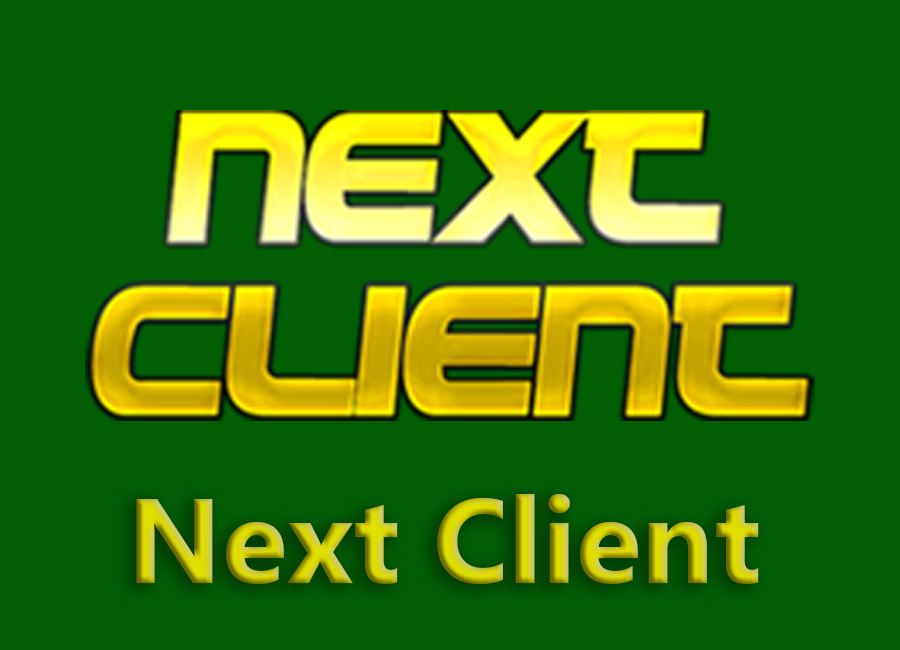
<style>
.page{position:relative;width:900px;height:650px;background:#015e05}
.page>*{position:absolute;margin:0}
.t1{font:120px "SegoeUI-Bold"}
</style>
<div class="page">
<p class="t1" style="left:136px;top:494px;width:623px;height:90px">Next Client</p>
</div>
